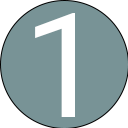
<style>
.page{position:relative;width:128px;height:128px;background:#789396}
.page>*{position:absolute;margin:0}
.t1{font:146.2px "Roboto-Regular";color:#ffffff}
</style>
<div class="page">
<p class="t1" style="left:35px;top:13px;width:40px;height:104px">1</p>
</div>
